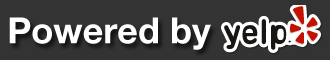
<style>
.page{position:relative;width:330px;height:60px;background:#333333}
.page>*{position:absolute;margin:0}
.t1{font:36px "HelveticaNeue-Bold";color:#ffffff}
</style>
<div class="page">
<p class="t1" style="left:9px;top:17px;width:202px;height:33px">Powered by</p>
</div>
